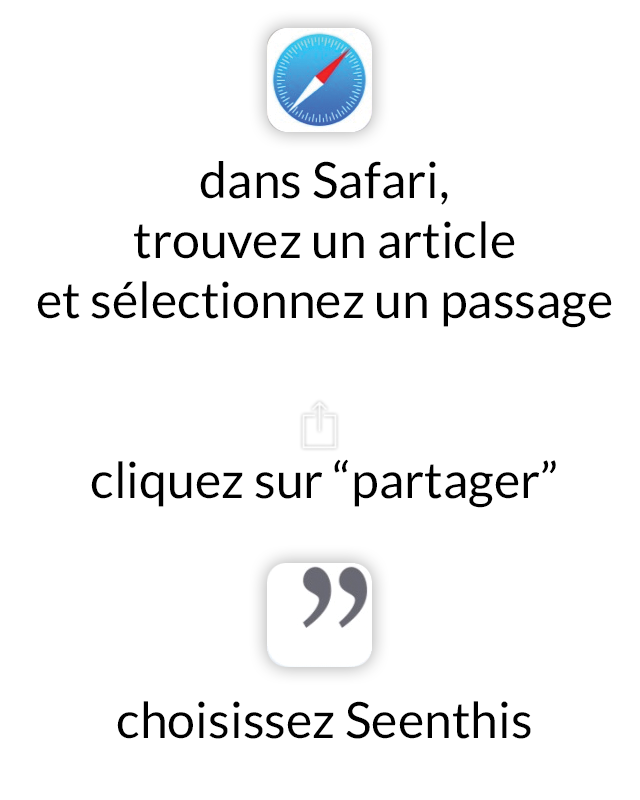
<style>
.page{position:relative;width:640px;height:800px;background:#ffffff}
.page>*{position:absolute;margin:0}
.t1{font:50px "Lato-Regular";color:#000000}
</style>
<div class="page">
<p class="t1" style="left:37px;top:161px;width:575px;height:578px;text-align:center">dans Safari,<br>trouvez un article<br>et sélectionnez un passage<br><br><br>cliquez sur “partager”<br><br><br><br>choisissez Seenthis</p>
</div>
